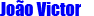
<style>
.page{position:relative;width:94px;height:16px;background:#ffffff}
.page>*{position:absolute;margin:0}
.t1{font:18px "Impact";color:#0000f8}
.t2{font:9px "Impact";color:#ffffff}
</style>
<div class="page">
<p class="t1" style="left:0px;top:0px;width:94px;height:16px">João Victor <span class="t2">CA</span></p>
</div>
